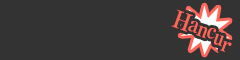
<style>
.page{position:relative;width:240px;height:60px;background:#333333}
.page>*{position:absolute;margin:0}
.t1{font:21.6px "RyuminPro-ExBold";letter-spacing:-0.08em;color:#ff655b;scale:0.9 1}
.t2{font:24px "RyuminPro-ExBold";letter-spacing:-0.08em;color:#ff655b;scale:0.9 1}
</style>
<div class="page">
<p class="t1" style="left:171px;top:9px;width:61px;height:43px;rotate:20deg"><span class="t2">H</span>ancur</p>
</div>
